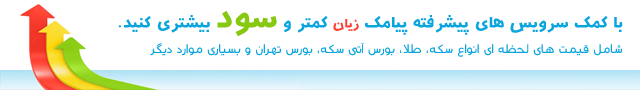
<style>
.page{position:relative;width:640px;height:90px;background:#ffffff}
.page>*{position:absolute;margin:0}
.t1{font:20px "B-aban";color:#0aa4de}
.t2{font:16px "B-aban";color:#fb4031}
.t3{font:40px "B-aban";color:#87c910}
.t4{font:18px "B-Baseet";color:#0aa4de}
</style>
<div class="page">
<p class="t1" style="left:118px;top:10px;width:505px;height:27px">با کمک سرویس های پیشرفته پیامک <span class="t2">زیان</span> کمتر و <span class="t3">سود</span> بیشتری کنید.</p>
<p class="t4" style="left:150px;top:42px;width:472px;height:15px">شامل قیمت های لحظه ای انواع سکه، طلا، بورس آتی سکه، بورس تهران و بسیاری موارد دیگر</p>
</div>
